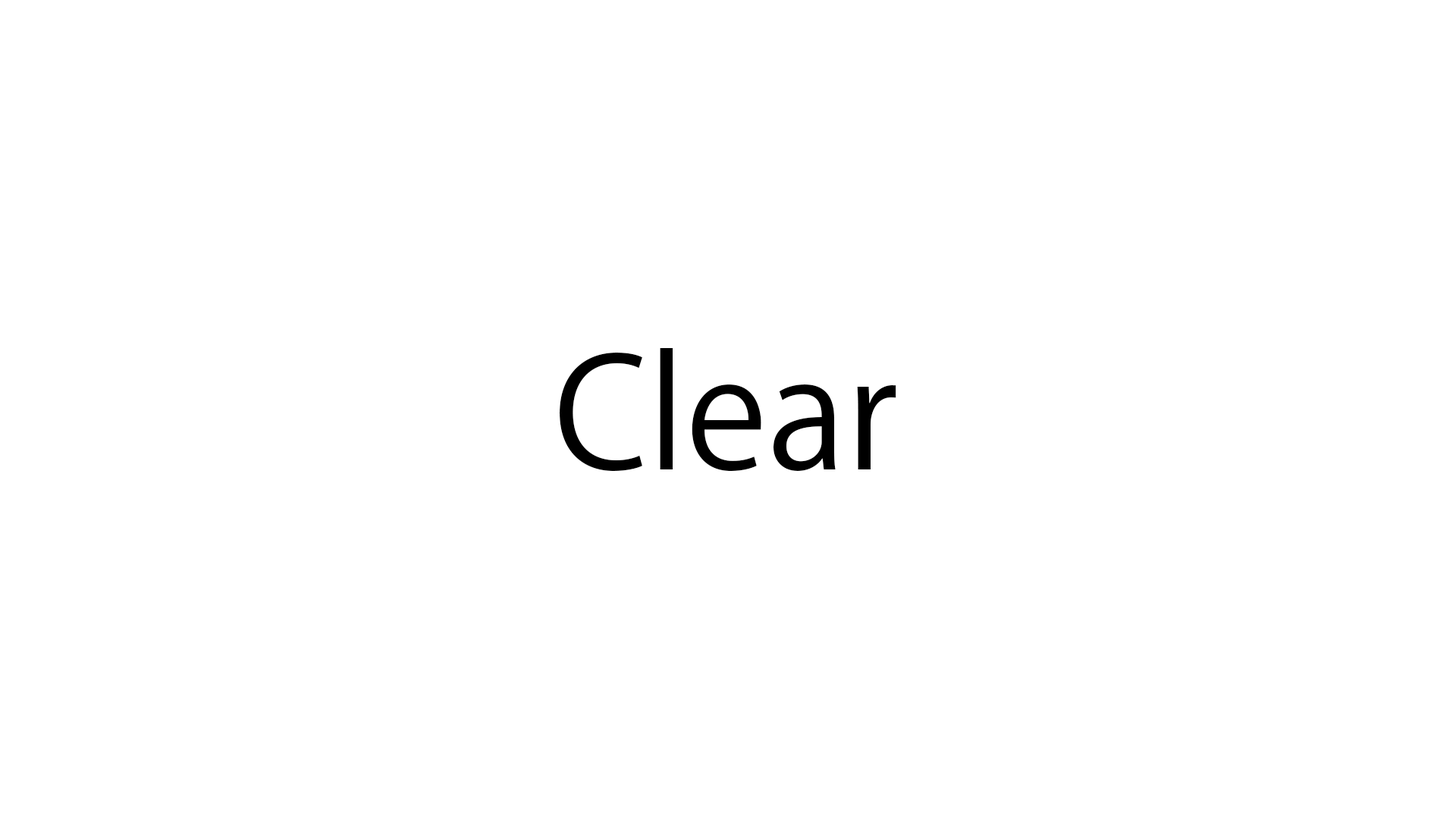
<style>
.page{position:relative;width:1456px;height:819px;background:#ffffff}
.page>*{position:absolute;margin:0}
.t1{font:151.7px "KozGoPr6N-Regular";color:#000000}
</style>
<div class="page">
<p class="t1" style="left:560px;top:348px;width:336px;height:123px">Clear</p>
</div>
